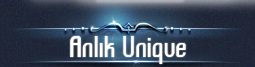
<style>
.page{position:relative;width:255px;height:67px}
.page>*{position:absolute;margin:0}
.t1{font:28.6px "TrSahKomikazba";letter-spacing:0.025em;color:#ffffff}
</style>
<div class="page">
<p class="t1" style="left:70px;top:36px;width:116px;height:28px">Anlık Unique</p>
</div>
